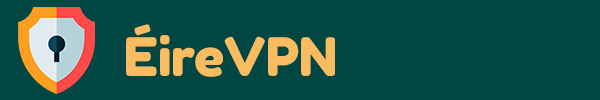
<style>
.page{position:relative;width:600px;height:100px;background:#004643}
.page>*{position:absolute;margin:0}
.t1{font:53px "FredokaOne-Regular";color:#f9bc60}
</style>
<div class="page">
<p class="t1" style="left:126px;top:24px;width:209px;height:53px">ÉireVPN</p>
</div>
